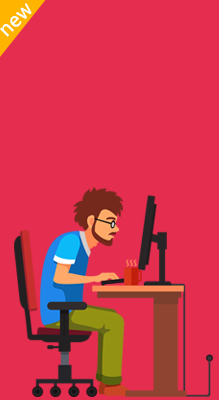
<style>
.page{position:relative;width:219px;height:400px;background:#e52d50}
.page>*{position:absolute;margin:0}
.t1{font:19px "MicrosoftYaHei";color:#fafafa;font-weight:bold}
</style>
<div class="page">
<p class="t1" style="left:0px;top:3px;width:32px;height:34px;rotate:-45deg">new</p>
</div>
